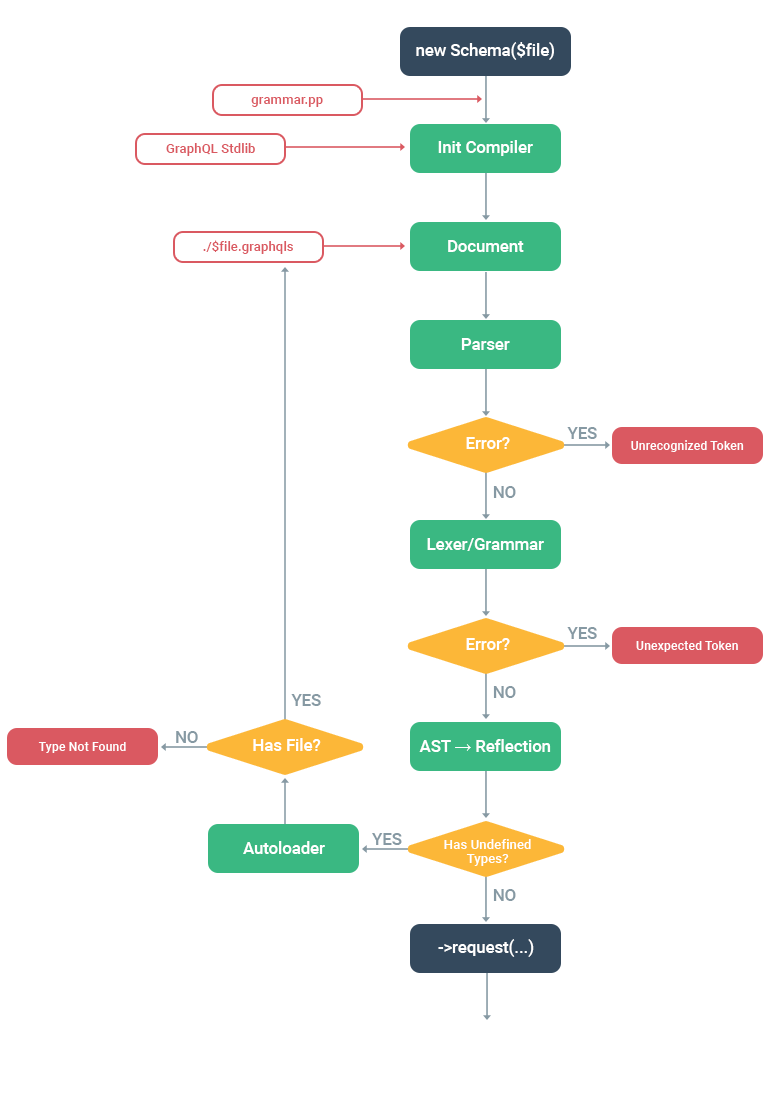
<style>
.page{position:relative;width:770px;height:1108px;background:#ffffff}
.page>*{position:absolute;margin:0}
.t1{font:16.6px "Roboto-Medium";color:#ffffff}
.t2{font:13.3px "Roboto-Medium";color:#da5961}
.t3{font:16.6px "Roboto-Medium";color:#8699a3}
.t4{font:12.5px "Roboto-Medium";color:#ffffff}
.t5{font:16.6px "TimesNewRomanPSMT";color:#ffffff}
.t6{font:13.3px/12.5px "Roboto-Medium";color:#ffffff}
.t7{font:16.6px/16.6px "Roboto-Medium";color:#ffffff}
.t8{font:13.3px/14.1px "Roboto-Medium";color:#ffffff}
</style>
<div class="page">
<p class="t1" style="left:416px;top:42px;width:138px;height:18px">new Schema($file)</p>
<p class="t2" style="left:251px;top:97px;width:72px;height:10px">grammar.pp</p>
<p class="t2" style="left:166px;top:143px;width:89px;height:13px">GraphQL Stdlib</p>
<p class="t1" style="left:438px;top:140px;width:95px;height:16px">Init Compiler</p>
<p class="t2" style="left:203px;top:240px;width:90px;height:14px">./$file.graphqls</p>
<p class="t1" style="left:448px;top:240px;width:76px;height:12px">Document</p>
<p class="t1" style="left:461px;top:338px;width:49px;height:12px">Parser</p>
<p class="t1" style="left:466px;top:437px;width:44px;height:12px">Error?</p>
<p class="t3" style="left:567px;top:427px;width:30px;height:12px">YES</p>
<p class="t4" style="left:631px;top:440px;width:113px;height:12px">Unrecognized Token</p>
<p class="t3" style="left:493px;top:486px;width:23px;height:12px">NO</p>
<p class="t1" style="left:427px;top:538px;width:117px;height:13px">Lexer/Grammar</p>
<p class="t3" style="left:567px;top:627px;width:30px;height:12px">YES</p>
<p class="t1" style="left:466px;top:638px;width:44px;height:12px">Error?</p>
<p class="t4" style="left:636px;top:641px;width:102px;height:11px">Unexpected Token</p>
<p class="t3" style="left:493px;top:686px;width:23px;height:12px">NO</p>
<p class="t3" style="left:291px;top:694px;width:30px;height:12px">YES</p>
<p class="t3" style="left:176px;top:731px;width:22px;height:12px">NO</p>
<p class="t4" style="left:38px;top:742px;width:88px;height:11px">Type Not Found</p>
<p class="t1" style="left:253px;top:738px;width:68px;height:13px">Has File?</p>
<p class="t1" style="left:419px;top:739px;width:132px;height:13px">AST <span class="t5">→ </span>Reflection</p>
<p class="t3" style="left:372px;top:833px;width:30px;height:12px">YES</p>
<p class="t1" style="left:243px;top:841px;width:82px;height:13px">Autoloader</p>
<p class="t6" style="left:444px;top:839px;width:87px;height:27px;text-align:center"><span class="t7"><br></span>Has Undefined<br><span class="t8">Types?</span></p>
<p class="t3" style="left:493px;top:889px;width:23px;height:12px">NO</p>
<p class="t1" style="left:438px;top:939px;width:96px;height:18px">-&gt;request(...)</p>
</div>
